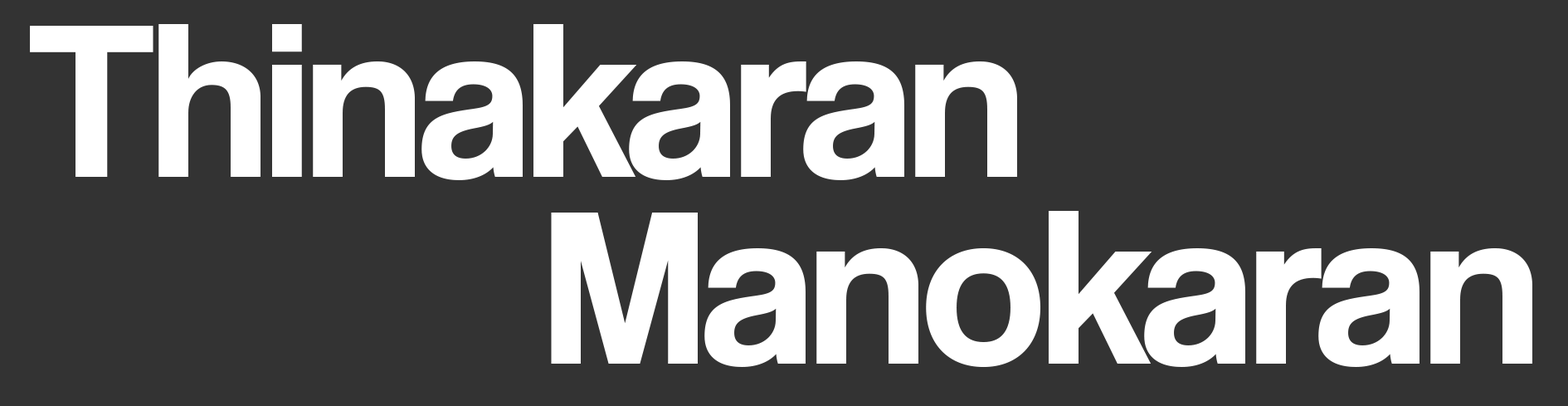
<style>
.page{position:relative;width:1568px;height:406px;background:#333333}
.page>*{position:absolute;margin:0}
.t1{font:228px/186.7px "Coolvetica-Regular";letter-spacing:-0.01em;color:#ffffff}
</style>
<div class="page">
<p class="t1" style="left:30px;top:24px;width:1502px;height:344px">Thinakaran<br>Manokaran</p>
</div>
